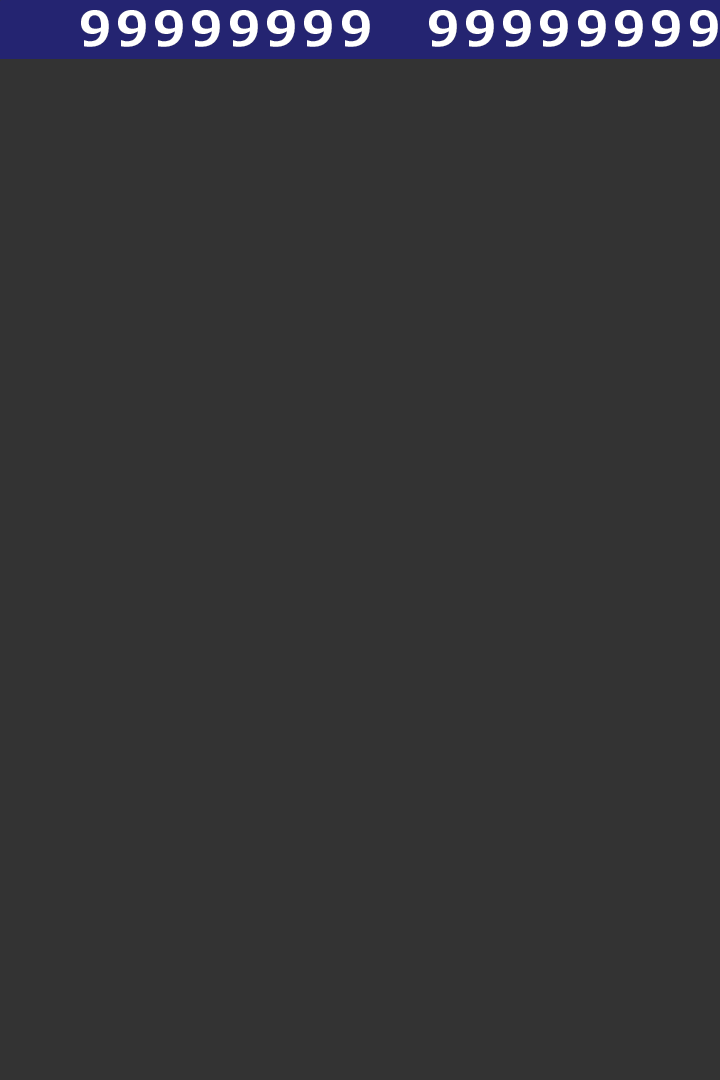
<style>
.page{position:relative;width:720px;height:1080px;background:#333333}
.page>*{position:absolute;margin:0}
.t1{font:48px "Meiryo-Bold";letter-spacing:0.1em;color:#ffffff}
</style>
<div class="page">
<p class="t1" style="left:81px;top:10px;width:289px;height:37px">99999999</p>
<p class="t1" style="left:429px;top:10px;width:289px;height:37px">99999999</p>
</div>
